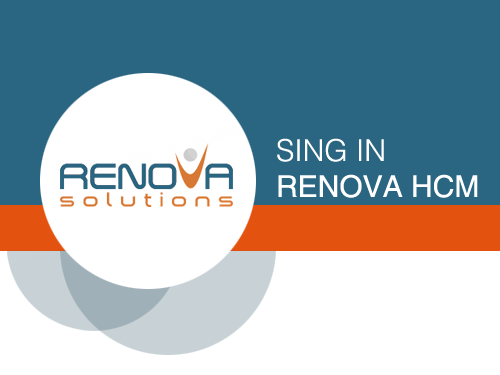
<style>
.page{position:relative;width:500px;height:375px;background:#2a6581}
.page>*{position:absolute;margin:0}
.t1{font:30px "Helvetica";color:#ffffff}
.t2{font:30px "Helvetica-Light";color:#ffffff}
</style>
<div class="page">
<p class="t1" style="left:277px;top:138px;width:201px;height:60px"><span class="t2">SING IN<br></span>RENOVA HCM</p>
</div>
